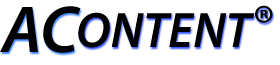
<style>
.page{position:relative;width:280px;height:65px;background:#ffffff}
.page>*{position:absolute;margin:0}
.t1{font:66.7px "MyriadPro-SemiboldIt";color:#000000}
.t2{font:50px "MyriadPro-SemiboldIt";color:#000000}
</style>
<div class="page">
<p class="t1" style="left:0px;top:6px;width:81px;height:47px">AC</p>
<p class="t2" style="left:255px;top:5px;width:18px;height:18px">®</p>
<p class="t2" style="left:78px;top:12px;width:177px;height:36px">ONTENT</p>
</div>
